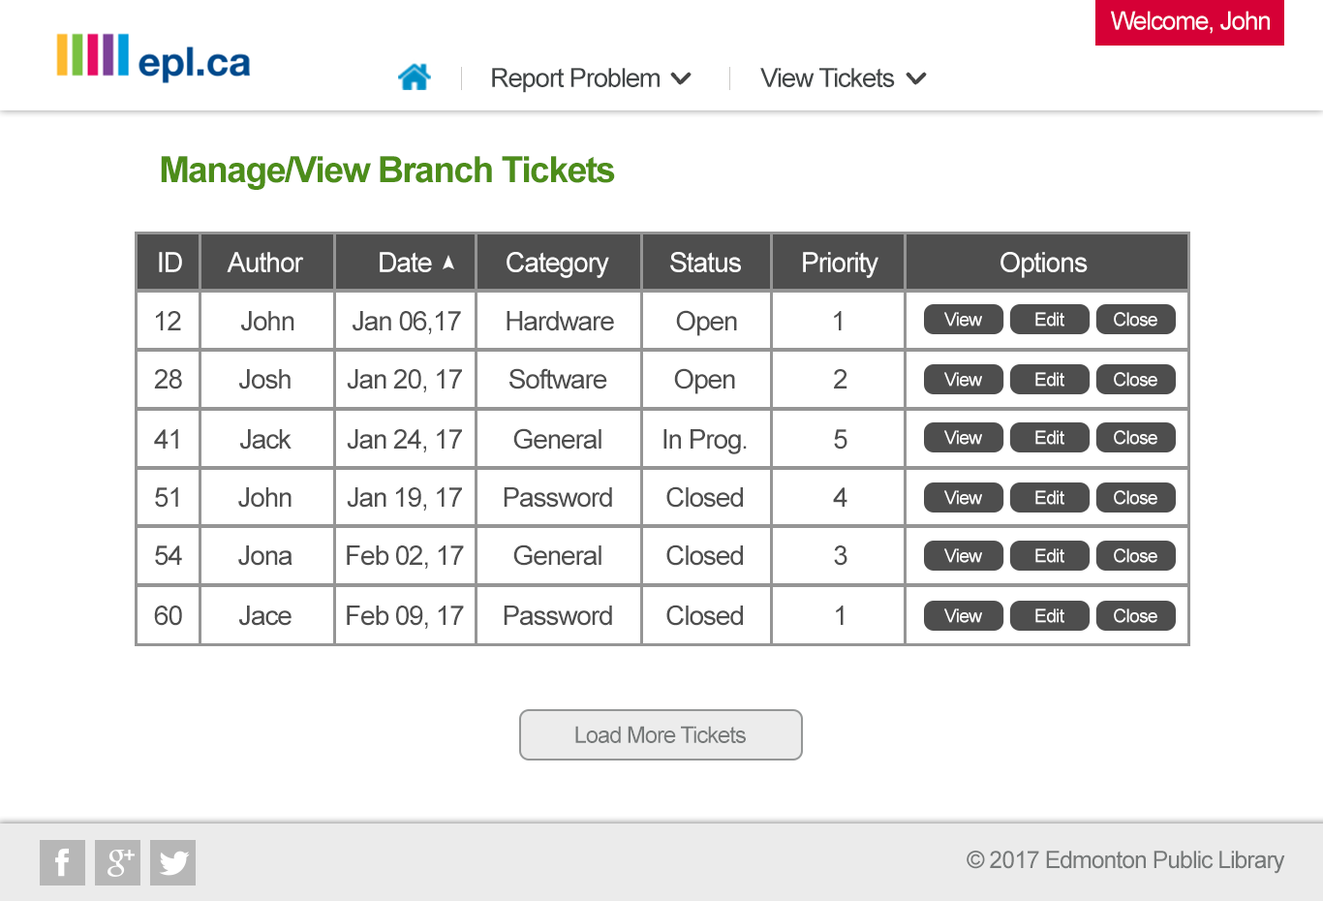
<style>
.page{position:relative;width:1323px;height:901px;background:#ffffff}
.page>*{position:absolute;margin:0}
.t1{font:25.2px "ArialMT";letter-spacing:-0.04em;color:#ffffff}
.t2{font:26.5px "ArialMT";letter-spacing:-0.04em;color:#414546}
.t3{font:36px "Arial-BoldMT";letter-spacing:-0.04em;color:#4d8d1a}
.t4{font:27.5px "ArialMT";letter-spacing:-0.04em;color:#ffffff}
.t5{font:27.1px "ArialMT";letter-spacing:-0.04em;color:#4e4e4e}
.t6{font:18.6px "ArialMT";letter-spacing:-0.04em;color:#ffffff}
.t7{font:22.9px "ArialMT";letter-spacing:-0.04em;color:#767979}
.t8{font:24px "ArialMT";letter-spacing:-0.04em;color:#767979}
</style>
<div class="page">
<p class="t1" style="left:1111px;top:11px;width:159px;height:23px">Welcome, John</p>
<p class="t2" style="left:492px;top:68px;width:168px;height:25px">Report Problem</p>
<p class="t2" style="left:761px;top:68px;width:134px;height:19px">View Tickets</p>
<p class="t3" style="left:161px;top:156px;width:454px;height:34px">Manage/View Branch Tickets</p>
<p class="t4" style="left:159px;top:252px;width:23px;height:20px">ID</p>
<p class="t4" style="left:227px;top:252px;width:77px;height:20px">Author</p>
<p class="t4" style="left:380px;top:252px;width:52px;height:20px">Date</p>
<p class="t4" style="left:507px;top:252px;width:102px;height:26px">Category</p>
<p class="t4" style="left:670px;top:252px;width:71px;height:20px">Status</p>
<p class="t4" style="left:803px;top:252px;width:76px;height:26px">Priority</p>
<p class="t4" style="left:1001px;top:252px;width:87px;height:26px">Options</p>
<p class="t5" style="left:156px;top:311px;width:25px;height:19px">12</p>
<p class="t5" style="left:241px;top:311px;width:54px;height:20px">John</p>
<p class="t5" style="left:353px;top:311px;width:108px;height:24px">Jan 06,17</p>
<p class="t5" style="left:507px;top:311px;width:107px;height:20px">Hardware</p>
<p class="t5" style="left:676px;top:310px;width:61px;height:26px">Open</p>
<p class="t5" style="left:834px;top:311px;width:8px;height:19px">1</p>
<p class="t6" style="left:945px;top:312px;width:37px;height:14px">View</p>
<p class="t6" style="left:1036px;top:312px;width:29px;height:14px">Edit</p>
<p class="t6" style="left:1114px;top:312px;width:44px;height:14px">Close</p>
<p class="t5" style="left:154px;top:369px;width:28px;height:20px">28</p>
<p class="t5" style="left:239px;top:369px;width:52px;height:20px">Josh</p>
<p class="t5" style="left:347px;top:369px;width:115px;height:24px">Jan 20, 17</p>
<p class="t5" style="left:510px;top:368px;width:97px;height:21px">Software</p>
<p class="t5" style="left:674px;top:368px;width:61px;height:26px">Open</p>
<p class="t5" style="left:834px;top:369px;width:14px;height:20px">2</p>
<p class="t6" style="left:945px;top:372px;width:37px;height:15px">View</p>
<p class="t6" style="left:1036px;top:372px;width:29px;height:15px">Edit</p>
<p class="t6" style="left:1114px;top:372px;width:44px;height:15px">Close</p>
<p class="t5" style="left:154px;top:429px;width:24px;height:20px">41</p>
<p class="t5" style="left:240px;top:429px;width:52px;height:21px">Jack</p>
<p class="t5" style="left:347px;top:429px;width:115px;height:24px">Jan 24, 17</p>
<p class="t5" style="left:513px;top:428px;width:89px;height:22px">General</p>
<p class="t5" style="left:664px;top:429px;width:83px;height:25px">In Prog.</p>
<p class="t5" style="left:834px;top:429px;width:14px;height:21px">5</p>
<p class="t6" style="left:945px;top:430px;width:37px;height:15px">View</p>
<p class="t6" style="left:1036px;top:430px;width:29px;height:15px">Edit</p>
<p class="t6" style="left:1114px;top:430px;width:44px;height:15px">Close</p>
<p class="t5" style="left:155px;top:487px;width:23px;height:21px">51</p>
<p class="t5" style="left:238px;top:487px;width:54px;height:21px">John</p>
<p class="t5" style="left:347px;top:487px;width:115px;height:25px">Jan 19, 17</p>
<p class="t5" style="left:504px;top:487px;width:108px;height:21px">Password</p>
<p class="t5" style="left:667px;top:486px;width:76px;height:22px">Closed</p>
<p class="t5" style="left:833px;top:487px;width:15px;height:20px">4</p>
<p class="t6" style="left:945px;top:490px;width:37px;height:15px">View</p>
<p class="t6" style="left:1036px;top:490px;width:29px;height:15px">Edit</p>
<p class="t6" style="left:1114px;top:490px;width:44px;height:15px">Close</p>
<p class="t5" style="left:155px;top:545px;width:27px;height:21px">54</p>
<p class="t5" style="left:238px;top:545px;width:55px;height:21px">Jona</p>
<p class="t5" style="left:347px;top:545px;width:117px;height:25px">Feb 02, 17</p>
<p class="t5" style="left:513px;top:544px;width:89px;height:22px">General</p>
<p class="t5" style="left:667px;top:544px;width:76px;height:22px">Closed</p>
<p class="t5" style="left:834px;top:545px;width:14px;height:21px">3</p>
<p class="t6" style="left:945px;top:548px;width:37px;height:15px">View</p>
<p class="t6" style="left:1036px;top:548px;width:29px;height:15px">Edit</p>
<p class="t6" style="left:1114px;top:548px;width:44px;height:15px">Close</p>
<p class="t5" style="left:154px;top:606px;width:28px;height:20px">60</p>
<p class="t5" style="left:239px;top:606px;width:53px;height:20px">Jace</p>
<p class="t5" style="left:347px;top:606px;width:117px;height:24px">Feb 09, 17</p>
<p class="t5" style="left:504px;top:606px;width:108px;height:20px">Password</p>
<p class="t5" style="left:667px;top:605px;width:76px;height:21px">Closed</p>
<p class="t5" style="left:836px;top:606px;width:8px;height:19px">1</p>
<p class="t6" style="left:945px;top:608px;width:37px;height:15px">View</p>
<p class="t6" style="left:1036px;top:608px;width:29px;height:15px">Edit</p>
<p class="t6" style="left:1114px;top:608px;width:44px;height:15px">Close</p>
<p class="t7" style="left:575px;top:726px;width:171px;height:17px">Load More Tickets</p>
<p class="t8" style="left:967px;top:851px;width:319px;height:23px">© 2017 Edmonton Public Library</p>
</div>
